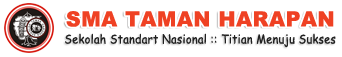
<style>
.page{position:relative;width:342px;height:57px;background:#ffffff}
.page>*{position:absolute;margin:0}
.t1{font:21px "Arial-Black";letter-spacing:0.025em;color:#ef4123}
.t2{font:12.3px "ComicSansMS";letter-spacing:0.025em;color:#212121;scale:0.89 1}
</style>
<div class="page">
<p class="t1" style="left:66px;top:11px;width:268px;height:16px">SMA TAMAN HARAPAN</p>
<p class="t2" style="left:65px;top:33px;width:271px;height:15px">Sekolah Standart Nasional :: Titian Menuju Sukses</p>
</div>
